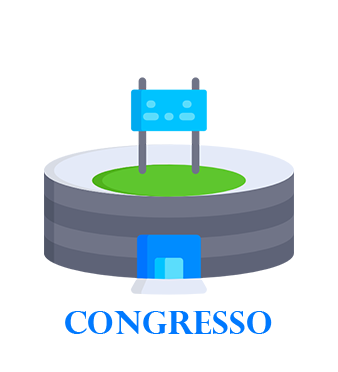
<style>
.page{position:relative;width:338px;height:372px;background:#ffffff}
.page>*{position:absolute;margin:0}
.t1{font:32.5px "PerpetuaTitlingMT-Bold";color:#0079ff}
</style>
<div class="page">
<p class="t1" style="left:65px;top:311px;width:207px;height:23px">Congresso</p>
</div>
